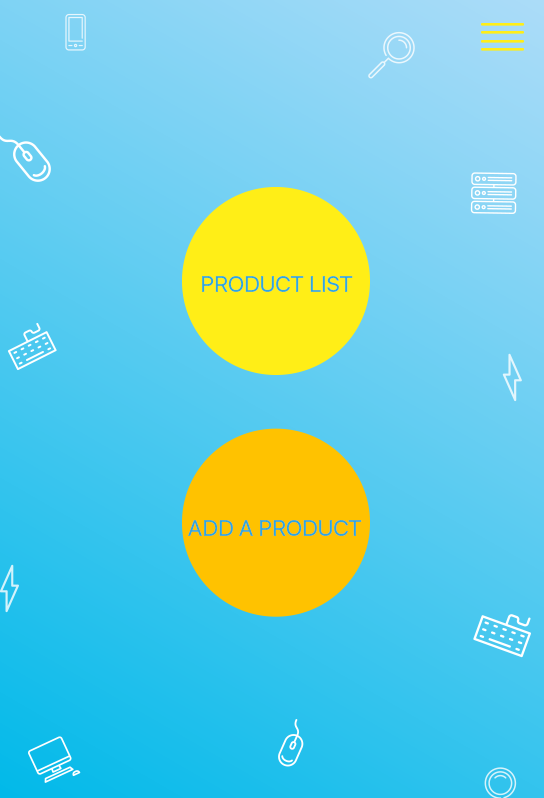
<style>
.page{position:relative;width:544px;height:798px}
.page>*{position:absolute;margin:0}
.t1{font:22.7px "SFUIDisplay-Regular";color:#2ea7e0;text-transform:uppercase}
</style>
<div class="page">
<p class="t1" style="left:202px;top:276px;width:151px;height:16px">Product List</p>
<p class="t1" style="left:188px;top:520px;width:174px;height:16px">Add a product</p>
</div>
